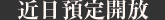
<style>
.page{position:relative;width:165px;height:20px;background:#333333}
.page>*{position:absolute;margin:0}
.t1{font:22px "RyuminPr6N-ExBold";color:#fff6f2}
</style>
<div class="page">
<p class="t1" style="left:17px;top:0px;width:132px;height:20px">近日預定開放</p>
</div>
